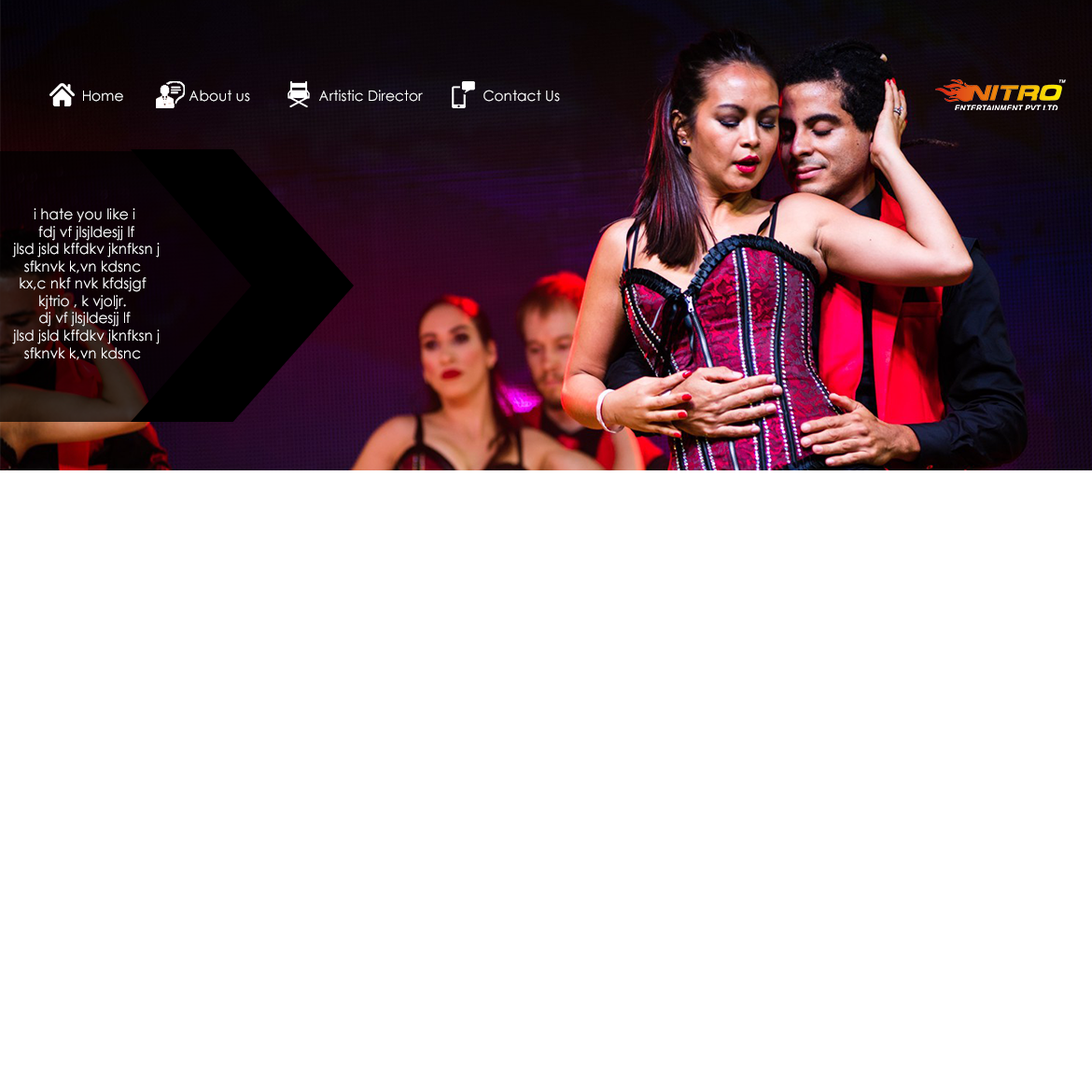
<style>
.page{position:relative;width:1092px;height:1092px;background:#ffffff}
.page>*{position:absolute;margin:0}
.t1{font:14.3px "CenturyGothic";color:#ffffff}
.t2{font:14.4px "CenturyGothic";color:#ffffff}
</style>
<div class="page">
<p class="t1" style="left:189px;top:90px;width:61px;height:12px">About us</p>
<p class="t1" style="left:319px;top:90px;width:104px;height:12px">Artistic Director</p>
<p class="t1" style="left:483px;top:90px;width:77px;height:12px">Contact Us</p>
<p class="t1" style="left:83px;top:91px;width:40px;height:11px">Home</p>
<p class="t2" style="left:12px;top:208px;width:148px;height:152px;text-align:center">i hate you like i<br> fdj vf jlsjldesjj lf<br>  jlsd jsld kffdkv jknfksn j <br>sfknvk k,vn kdsnc <br>kx,c nkf nvk kfdsjgf <br>kjtrio , k vjoljr. <br>dj vf jlsjldesjj lf<br>  jlsd jsld kffdkv jknfksn j <br>sfknvk k,vn kdsnc</p>
</div>
